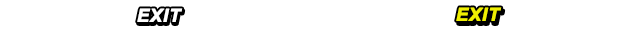
<style>
.page{position:relative;width:640px;height:36px;background:#ffffff}
.page>*{position:absolute;margin:0}
.t1{font:18px "Arial-BoldItalicMT";letter-spacing:0.03em;color:#ffffff;font-weight:bold}
.t2{font:18px "Arial-BoldItalicMT";letter-spacing:0.03em;color:#efef01;font-weight:bold}
</style>
<div class="page">
<p class="t1" style="left:137px;top:8px;width:46px;height:14px">EXIT</p>
<p class="t2" style="left:456px;top:7px;width:46px;height:14px">EXIT</p>
</div>
